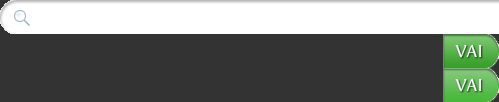
<style>
.page{position:relative;width:499px;height:102px;background:#333333}
.page>*{position:absolute;margin:0}
.t1{font:18px "Fontin-Regular";color:#ffffff}
</style>
<div class="page">
<p class="t1" style="left:455px;top:44px;width:27px;height:14px">VAI</p>
<p class="t1" style="left:455px;top:78px;width:27px;height:14px">VAI</p>
</div>
